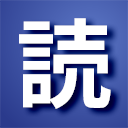
<style>
.page{position:relative;width:128px;height:128px;background:#ffffff}
.page>*{position:absolute;margin:0}
.t1{font:96.1px "NotoSansJP-Bold";color:#ffffff}
</style>
<div class="page">
<p class="t1" style="left:19px;top:18px;width:92px;height:91px">読</p>
</div>
